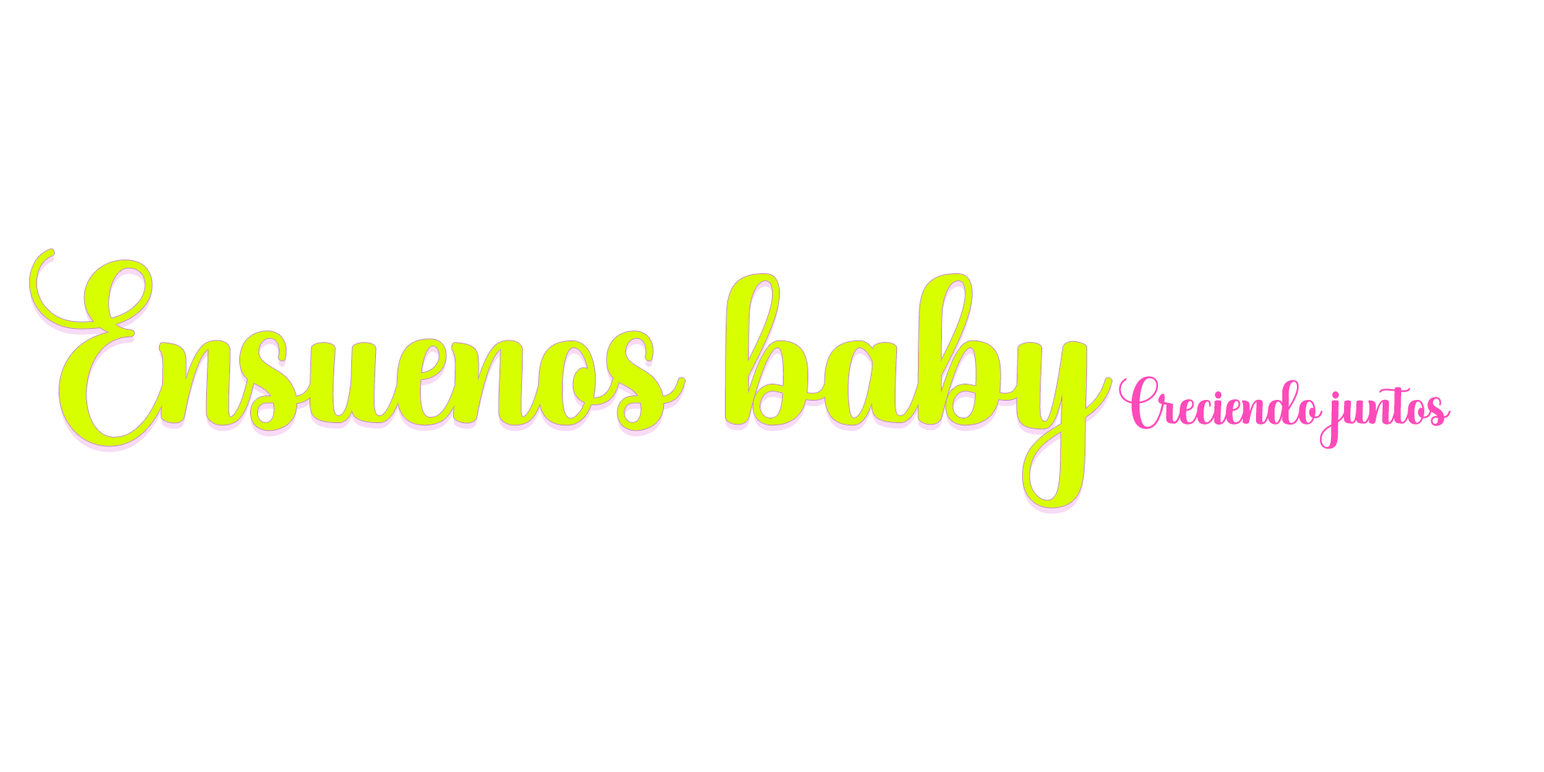
<style>
.page{position:relative;width:1544px;height:772px;background:#ffffff}
.page>*{position:absolute;margin:0}
.t1{font:189.9px "BabyGirlyScript";color:#d7ff00}
.t2{font:189.9px "BabyGirlyScript";color:#d8ff00}
.t3{font:56px "BabyGirlyScript";color:#ff4bba}
</style>
<div class="page">
<p class="t1" style="left:29px;top:249px;width:656px;height:197px">Ensuenos</p>
<p class="t2" style="left:726px;top:274px;width:386px;height:234px">baby</p>
<p class="t3" style="left:1119px;top:376px;width:332px;height:73px">Creciendo juntos</p>
</div>
